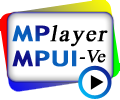
<style>
.page{position:relative;width:120px;height:100px;background:#ffffff}
.page>*{position:absolute;margin:0}
.t1{font:21.6px "TrebuchetMS-Bold";font-weight:bold;scale:1.28 1}
.t2{font:23px "TimesNewRomanPSMT";letter-spacing:0.075em;color:#000000;font-weight:bold;font-style:italic}
.t3{font:18px "TimesNewRomanPSMT";color:#000000;font-weight:bold;font-style:italic}
</style>
<div class="page">
<p class="t1" style="left:12px;top:25px;width:38px;height:17px">MP</p>
<p class="t2" style="left:50px;top:25px;width:58px;height:22px">layer</p>
<p class="t1" style="left:12px;top:50px;width:65px;height:17px">MPUI</p>
<p class="t3" style="left:79px;top:50px;width:27px;height:13px">-Ve</p>
</div>
